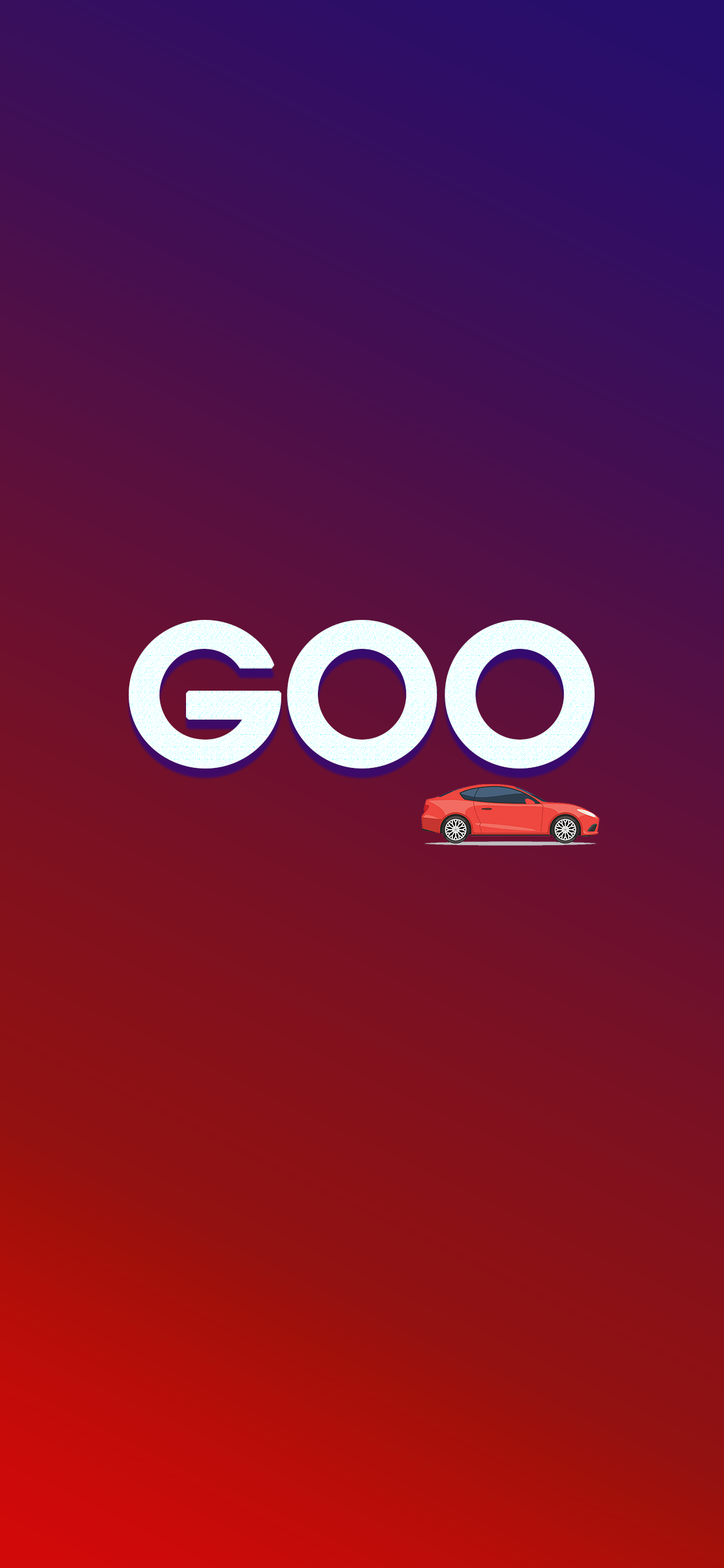
<style>
.page{position:relative;width:724px;height:1568px}
.page>*{position:absolute;margin:0}
.t1{font:186.7px "AvantGardeLT-Demi";letter-spacing:-0.02em;color:#ffffff;font-weight:bold}
</style>
<div class="page">
<p class="t1" style="left:129px;top:620px;width:466px;height:149px">GOO</p>
</div>
